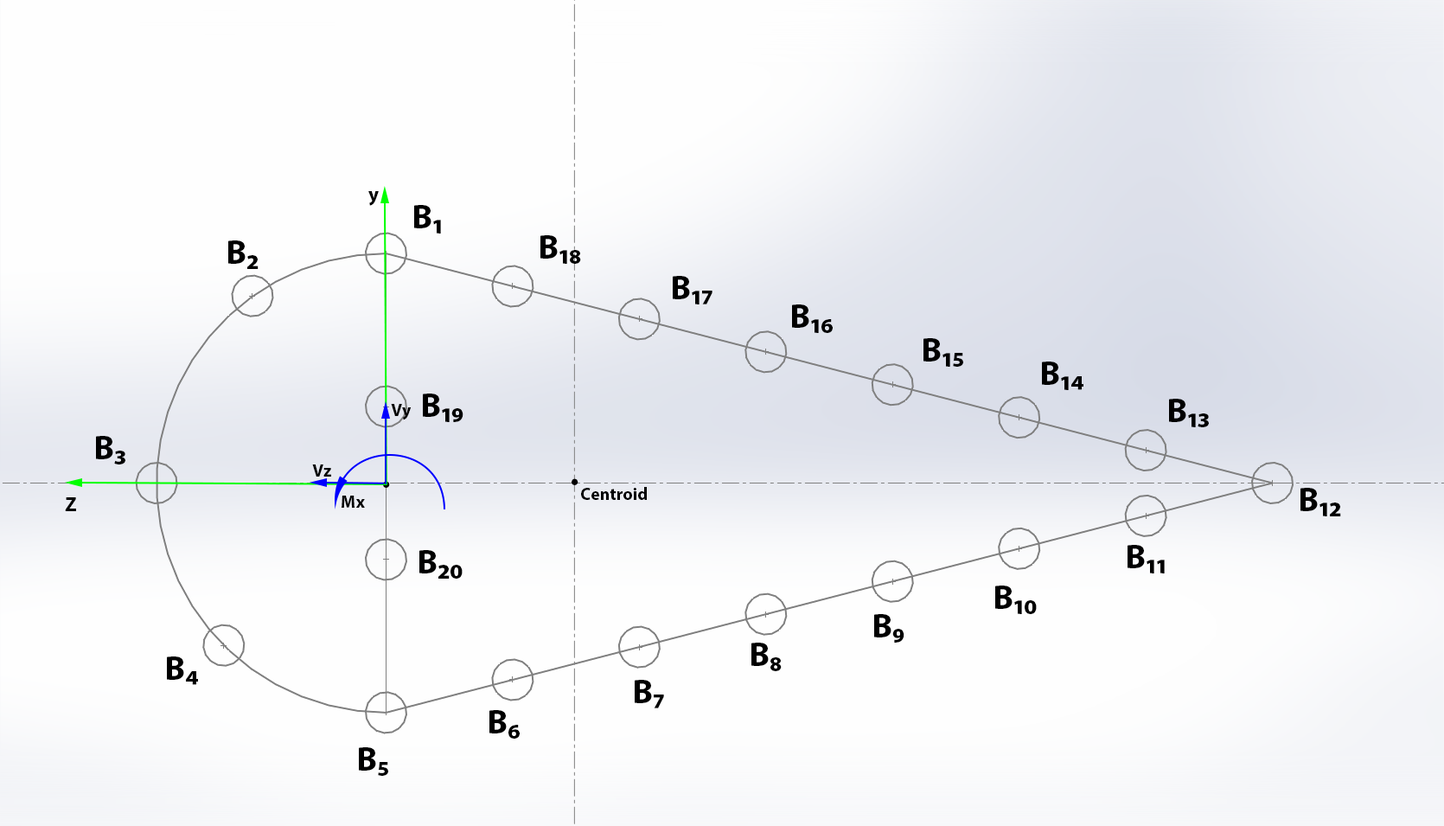
<style>
.page{position:relative;width:1444px;height:826px;background:#fefefe}
.page>*{position:absolute;margin:0}
.t1{font:20.2px "MyriadPro-Bold";color:#000000}
.t2{font:34.6px "MyriadPro-Bold";color:#000000}
.t3{font:17.3px "MyriadPro-Bold";color:#000000}
.t4{font:34.6px "MyriadPro-Bold"}
</style>
<div class="page">
<p class="t1" style="left:368px;top:191px;width:11px;height:15px">y</p>
<p class="t2" style="left:414px;top:205px;width:27px;height:28px">B1</p>
<p class="t2" style="left:228px;top:240px;width:31px;height:29px">B2</p>
<p class="t2" style="left:540px;top:235px;width:41px;height:29px">B18</p>
<p class="t2" style="left:673px;top:276px;width:39px;height:28px">B17</p>
<p class="t2" style="left:792px;top:304px;width:41px;height:29px">B16</p>
<p class="t2" style="left:923px;top:338px;width:40px;height:29px">B15</p>
<p class="t2" style="left:1042px;top:361px;width:41px;height:29px">B14</p>
<p class="t2" style="left:423px;top:393px;width:40px;height:29px">B19</p>
<p class="t2" style="left:1169px;top:399px;width:40px;height:28px">B13</p>
<p class="t3" style="left:391px;top:404px;width:21px;height:16px">Vy</p>
<p class="t2" style="left:96px;top:436px;width:29px;height:28px">B3</p>
<p class="t3" style="left:312px;top:464px;width:19px;height:12px">Vz</p>
<p class="t4" style="left:383px;top:481px;width:7px;height:7px">.</p>
<p class="t2" style="left:572px;top:478px;width:6px;height:7px">.</p>
<p class="t1" style="left:65px;top:497px;width:11px;height:14px">Z</p>
<p class="t3" style="left:342px;top:495px;width:23px;height:13px">Mx</p>
<p class="t3" style="left:581px;top:487px;width:66px;height:13px">Centroid</p>
<p class="t2" style="left:1300px;top:488px;width:41px;height:28px">B12</p>
<p class="t2" style="left:1128px;top:545px;width:37px;height:28px">B11</p>
<p class="t2" style="left:419px;top:550px;width:44px;height:28px">B20</p>
<p class="t2" style="left:995px;top:585px;width:42px;height:29px">B10</p>
<p class="t2" style="left:874px;top:614px;width:30px;height:28px">B9</p>
<p class="t2" style="left:751px;top:642px;width:31px;height:29px">B8</p>
<p class="t2" style="left:167px;top:656px;width:31px;height:29px">B4</p>
<p class="t2" style="left:635px;top:680px;width:29px;height:28px">B7</p>
<p class="t2" style="left:489px;top:710px;width:31px;height:28px">B6</p>
<p class="t2" style="left:359px;top:747px;width:29px;height:29px">B5</p>
</div>
